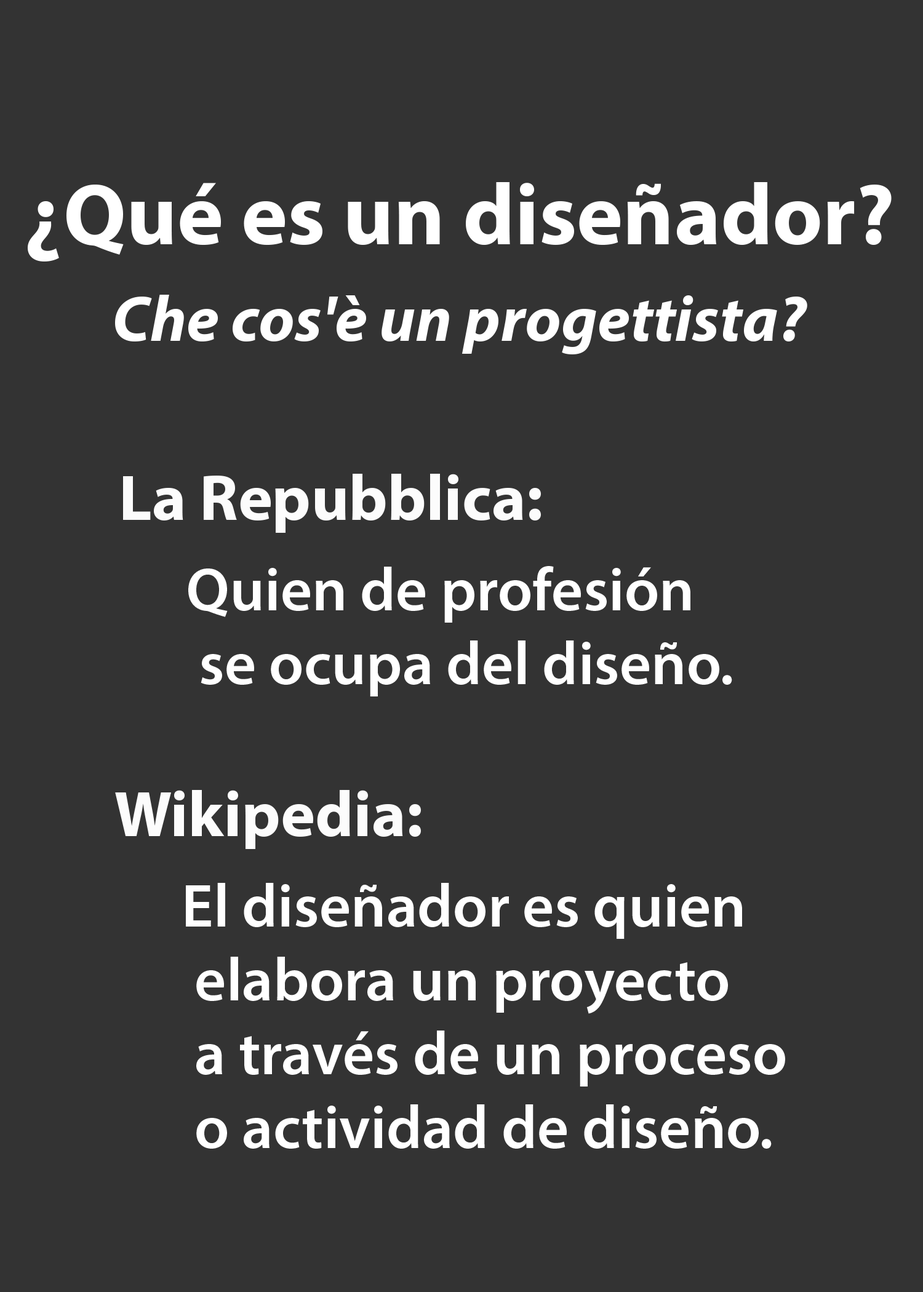
<style>
.page{position:relative;width:923px;height:1292px;background:#333333}
.page>*{position:absolute;margin:0}
.t1{font:87.4px "MyriadPro-Bold";color:#ffffff}
.t2{font:65px "MyriadPro-BoldIt";color:#ffffff}
.t3{font:65px "MyriadPro-Bold";color:#fcfcfc}
.t4{font:61.5px "MyriadPro-Semibold";color:#ffffff}
</style>
<div class="page">
<p class="t1" style="left:28px;top:182px;width:864px;height:79px">¿Qué es un diseñador?</p>
<p class="t2" style="left:115px;top:295px;width:692px;height:59px">Che cos'è un progettista?</p>
<p class="t3" style="left:123px;top:474px;width:418px;height:59px">La Repubblica:</p>
<p class="t4" style="left:188px;top:566px;width:544px;height:130px">Quien de profesión<br> se ocupa del diseño.</p>
<p class="t3" style="left:115px;top:790px;width:306px;height:59px">Wikipedia:</p>
<p class="t4" style="left:186px;top:883px;width:599px;height:266px">El diseñador es quien<br> elabora un proyecto<br> a través de un proceso<br> o actividad de diseño.</p>
</div>
